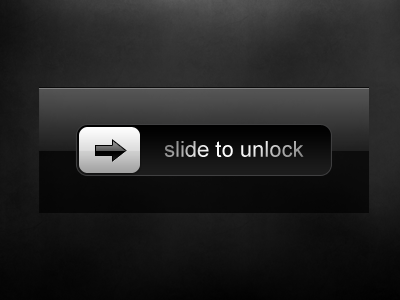
<style>
.page{position:relative;width:400px;height:300px}
.page>*{position:absolute;margin:0}
.t1{font:22px "ArialMT"}
</style>
<div class="page">
<p class="t1" style="left:164px;top:141px;width:140px;height:16px">slide to unlock</p>
</div>
